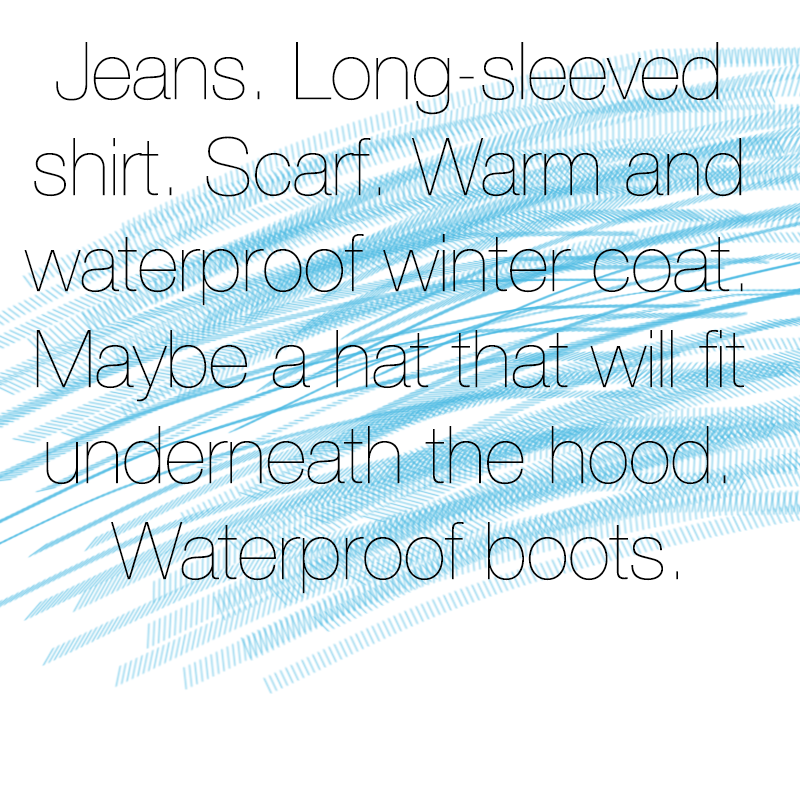
<style>
.page{position:relative;width:800px;height:800px;background:#ffffff}
.page>*{position:absolute;margin:0}
.t1{font:80px "HelveticaNeue-UltraLight";color:#000000}
</style>
<div class="page">
<p class="t1" style="left:24px;top:42px;width:721px;height:552px;text-align:center">Jeans. Long-sleeved <br>shirt. Scarf. Warm and <br>waterproof winter coat. <br>Maybe a hat that will fit <br>underneath the hood. <br>Waterproof boots.</p>
</div>
